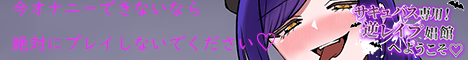
<style>
.page{position:relative;width:468px;height:60px}
.page>*{position:absolute;margin:0}
.t1{font:17.3px "UDDigiKyokashoN";color:#ed29f4}
.t2{font:22.5px "KozGoPr6N-Regular";color:#ed29f4}
</style>
<div class="page">
<p class="t1" style="left:12px;top:0px;width:263px;height:52px">今オナニーできないなら<br>絶対にプレイしないでください<span class="t2">♡</span></p>
</div>
